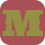
<style>
.page{position:relative;width:45px;height:45px;background:#a75157}
.page>*{position:absolute;margin:0}
.t1{font:50px "Saddlebag-Black";color:#949146}
</style>
<div class="page">
<p class="t1" style="left:2px;top:10px;width:41px;height:26px">M</p>
</div>
